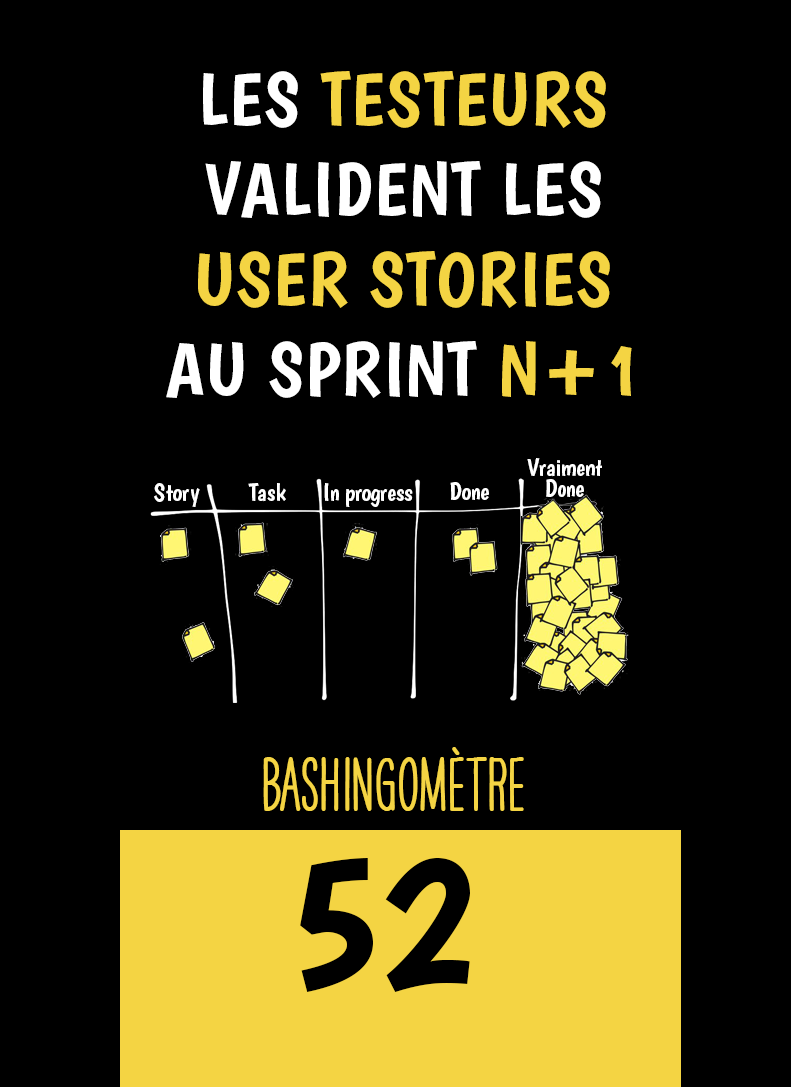
<style>
.page{position:relative;width:791px;height:1087px;background:#000000}
.page>*{position:absolute;margin:0}
.t1{font:75px "Boogaloo-Regular";letter-spacing:0.02em;color:#ffffff}
.t2{font:75px "Boogaloo-Regular";letter-spacing:0.02em;color:#f4d443}
.t3{font:25px/20.8px "Boogaloo-Regular";letter-spacing:-0.02em;color:#ffffff}
.t4{font:25px "Boogaloo-Regular";color:#ffffff}
.t5{font:25px "Boogaloo-Regular";letter-spacing:-0.02em;color:#ffffff}
.t6{font:66.7px "HAVEANICEDAYTallW04-Bold";color:#f4d443}
.t7{font:200px "Boogaloo-Regular";color:#000000}
</style>
<div class="page">
<p class="t1" style="left:166px;top:71px;width:466px;height:327px;text-align:center">LES <span class="t2">TESTEURS<br></span>VALIDENT LES <br><span class="t2">USER STORIES<br></span>AU SPRINT <span class="t2">N+1</span></p>
<p class="t3" style="left:527px;top:458px;width:75px;height:39px;text-align:center">Vraiment<br>Done</p>
<p class="t4" style="left:154px;top:483px;width:46px;height:24px">Story</p>
<p class="t4" style="left:248px;top:483px;width:38px;height:19px">Task</p>
<p class="t5" style="left:324px;top:483px;width:89px;height:24px">In progress</p>
<p class="t5" style="left:450px;top:482px;width:39px;height:18px">Done</p>
<p class="t6" style="left:263px;top:747px;width:261px;height:64px">BASHINgomètre</p>
<p class="t7" style="left:300px;top:858px;width:170px;height:134px">52</p>
</div>
